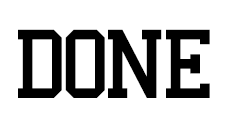
<style>
.page{position:relative;width:230px;height:128px;background:#ffffff}
.page>*{position:absolute;margin:0}
.t1{font:99.7px "College";letter-spacing:-0.06em;color:#000000}
</style>
<div class="page">
<p class="t1" style="left:18px;top:29px;width:192px;height:69px">DONE</p>
</div>
